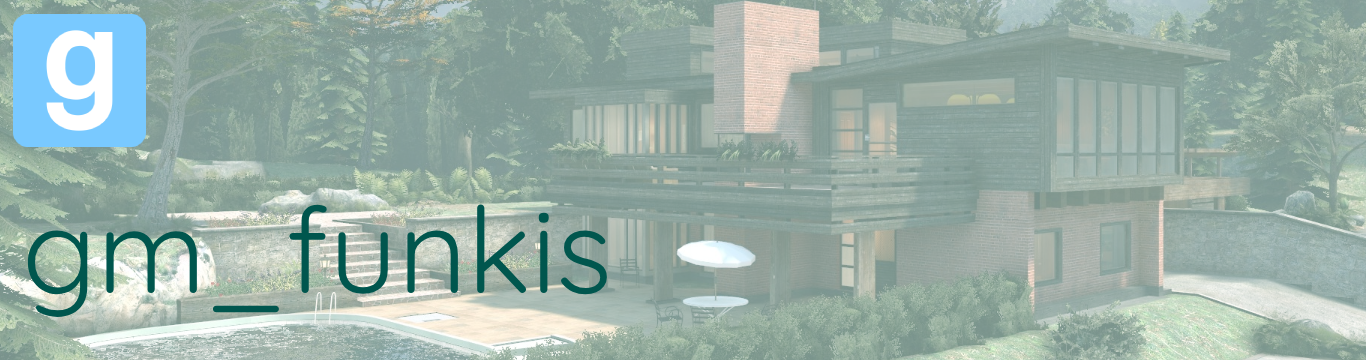
<style>
.page{position:relative;width:1366px;height:360px}
.page>*{position:absolute;margin:0}
.t1{font:119.7px "Quicksand-Regular";color:#00564e}
</style>
<div class="page">
<p class="t1" style="left:27px;top:204px;width:580px;height:113px">gm_funkis</p>
</div>
